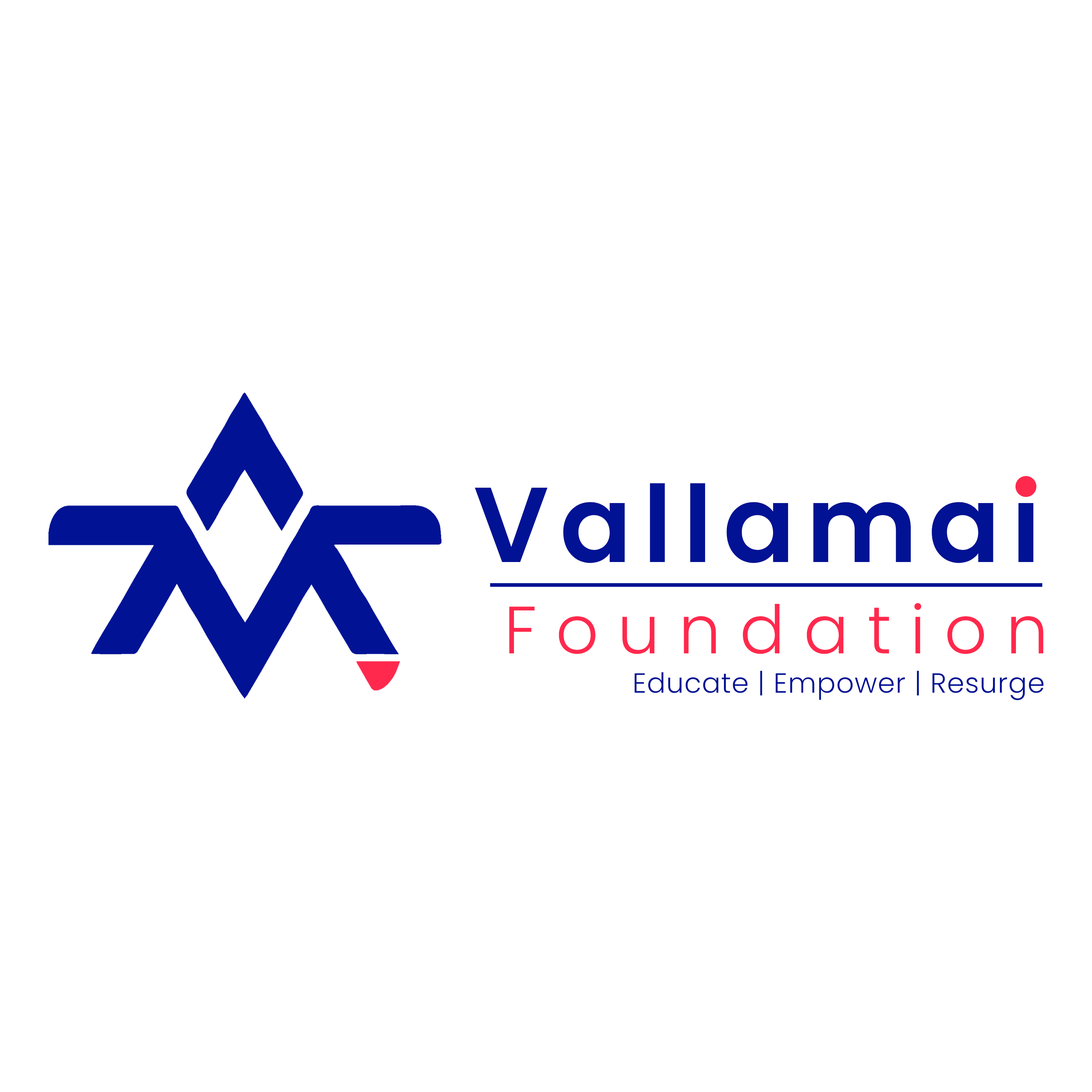
<style>
.page{position:relative;width:1092px;height:1092px;background:#ffffff}
.page>*{position:absolute;margin:0}
.t1{font:106.5px "Poppins-SemiBold";letter-spacing:0.1em;color:#011294}
.t2{font:66.9px "Poppins-Light";letter-spacing:0.28em;color:#ff294d}
.t3{font:106.5px "Poppins-SemiBold";letter-spacing:0.1em;color:#ff294d}
.t4{font:27.7px "Poppins-Light";letter-spacing:0.02em;color:#011294}
</style>
<div class="page">
<p class="t1" style="left:475px;top:478px;width:560px;height:85px">Vallamai</p>
<p class="t2" style="left:509px;top:603px;width:535px;height:51px"><span class="t3"> </span>Foundation</p>
<p class="t4" style="left:634px;top:670px;width:410px;height:30px">Educate | Empower | Resurge</p>
</div>
